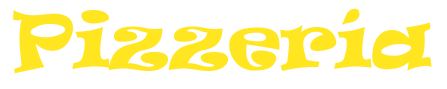
<style>
.page{position:relative;width:447px;height:89px;background:#ffffff}
.page>*{position:absolute;margin:0}
.t1{font:72px "Ravie";color:#ffe621}
</style>
<div class="page">
<p class="t1" style="left:13px;top:8px;width:419px;height:66px">Pizzería</p>
</div>
